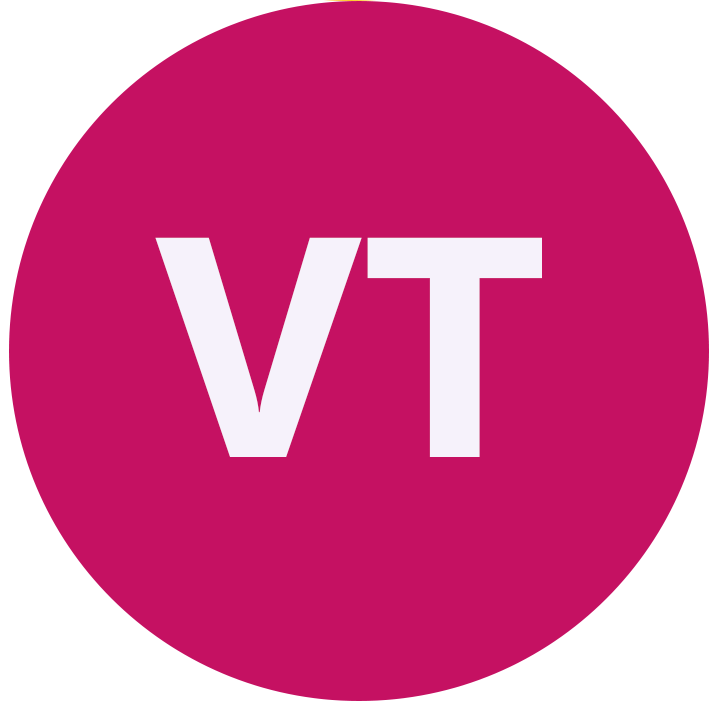
<style>
.page{position:relative;width:709px;height:709px;background:#c51162}
.page>*{position:absolute;margin:0}
.t1{font:312.5px "MicrosoftPhagsPa-Bold";color:#f6f2fb}
</style>
<div class="page">
<p class="t1" style="left:155px;top:237px;width:387px;height:220px">VT</p>
</div>
